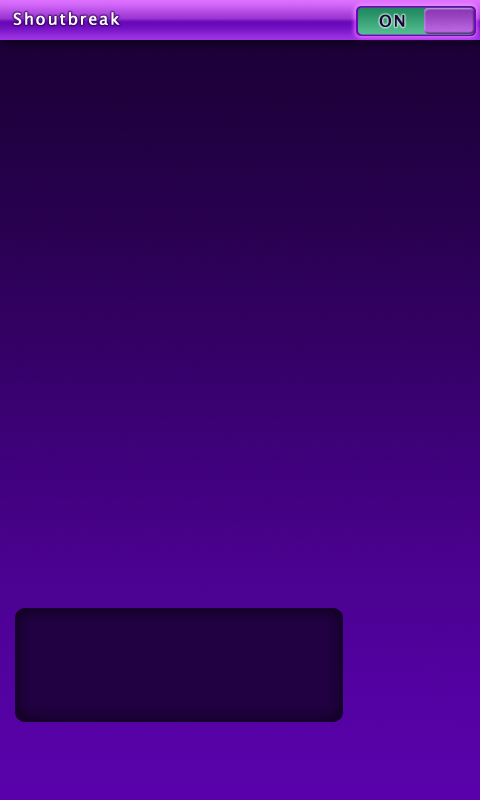
<style>
.page{position:relative;width:480px;height:800px}
.page>*{position:absolute;margin:0}
.t1{font:16px "LucidaSansUnicode";letter-spacing:0.1em;color:#ffffff;font-weight:bold}
.t2{font:16px "LucidaSansUnicode";letter-spacing:0.1em;color:#1e013b;font-weight:bold}
</style>
<div class="page">
<p class="t1" style="left:13px;top:12px;width:107px;height:13px">Shoutbreak</p>
<p class="t2" style="left:379px;top:14px;width:26px;height:13px">ON</p>
</div>
